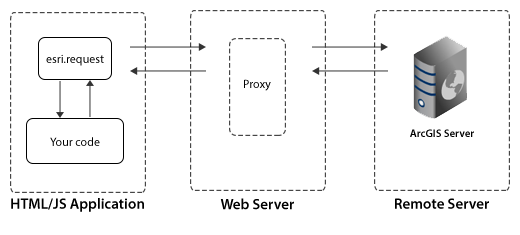
<style>
.page{position:relative;width:520px;height:235px;background:#ffffff}
.page>*{position:absolute;margin:0}
.t1{font:12px "MyriadPro-Regular";color:#000000}
.t2{font:11px "MyriadPro-Semibold";color:#000000}
.t3{font:15px "MyriadPro-Semibold";color:#000000}
</style>
<div class="page">
<p class="t1" style="left:46px;top:54px;width:58px;height:12px">esri.request</p>
<p class="t1" style="left:244px;top:79px;width:27px;height:12px">Proxy</p>
<p class="t1" style="left:50px;top:137px;width:50px;height:9px">Your code</p>
<p class="t2" style="left:410px;top:129px;width:64px;height:8px">ArcGIS Server</p>
<p class="t3" style="left:11px;top:198px;width:133px;height:14px">HTML/JS Application</p>
<p class="t3" style="left:220px;top:198px;width:74px;height:12px">Web Server</p>
<p class="t3" style="left:395px;top:198px;width:94px;height:11px">Remote Server</p>
</div>
